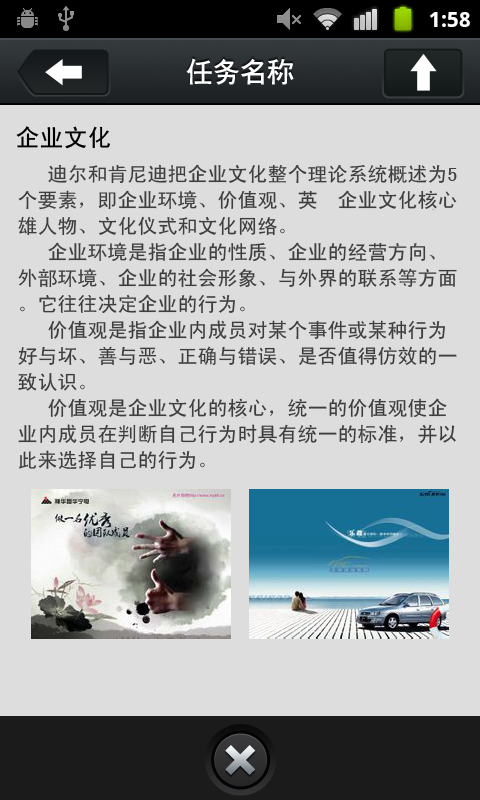
<style>
.page{position:relative;width:480px;height:800px;background:#dddddd}
.page>*{position:absolute;margin:0}
.t1{font:27px "CTCuHeiSJ";color:#ffffff}
.t2{font:24px "SimHei";color:#010101}
.t3{font:20px/26px "SimHei";color:#3e3e3e}
</style>
<div class="page">
<p class="t1" style="left:186px;top:58px;width:108px;height:27px">任务名称</p>
<p class="t2" style="left:16px;top:126px;width:94px;height:23px">企业文化</p>
<p class="t3" style="left:18px;top:164px;width:439px;height:306px">迪尔和肯尼迪把企业文化整个理论系统概述为5个要素，即企业环境、价值观、英  企业文化核心雄人物、文化仪式和文化网络。 　　  <br>   企业环境是指企业的性质、企业的经营方向、外部环境、企业的社会形象、与外界的联系等方面。它往往决定企业的行为。 　　<br>   价值观是指企业内成员对某个事件或某种行为好与坏、善与恶、正确与错误、是否值得仿效的一致认识。<br>   价值观是企业文化的核心，统一的价值观使企业内成员在判断自己行为时具有统一的标准，并以此来选择自己的行为。</p>
</div>
